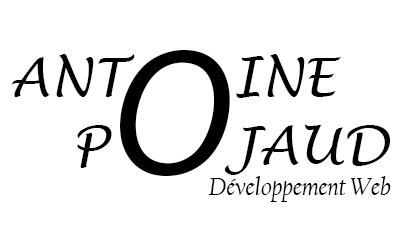
<style>
.page{position:relative;width:400px;height:225px;background:#ffffff}
.page>*{position:absolute;margin:0}
.t1{font:52.1px "LucidaHandwriting-Italic";color:#000000}
.t2{font:180.6px "MyriadPro-It";color:#000000}
.t3{font:26px "CalifornianFB-Italic";color:#000000}
</style>
<div class="page">
<p class="t1" style="left:11px;top:54px;width:330px;height:44px">ANT      INE</p>
<p class="t2" style="left:120px;top:49px;width:110px;height:128px">O</p>
<p class="t1" style="left:77px;top:124px;width:313px;height:51px">P       JAUD</p>
<p class="t3" style="left:208px;top:176px;width:183px;height:26px">Développement Web</p>
</div>
